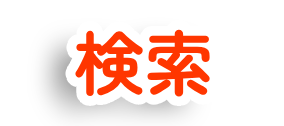
<style>
.page{position:relative;width:284px;height:126px;background:#ffffff}
.page>*{position:absolute;margin:0}
.t1{font:70px "ZenMaruGothic-Bold";color:#ff3600}
</style>
<div class="page">
<p class="t1" style="left:75px;top:29px;width:135px;height:68px">検索</p>
</div>
